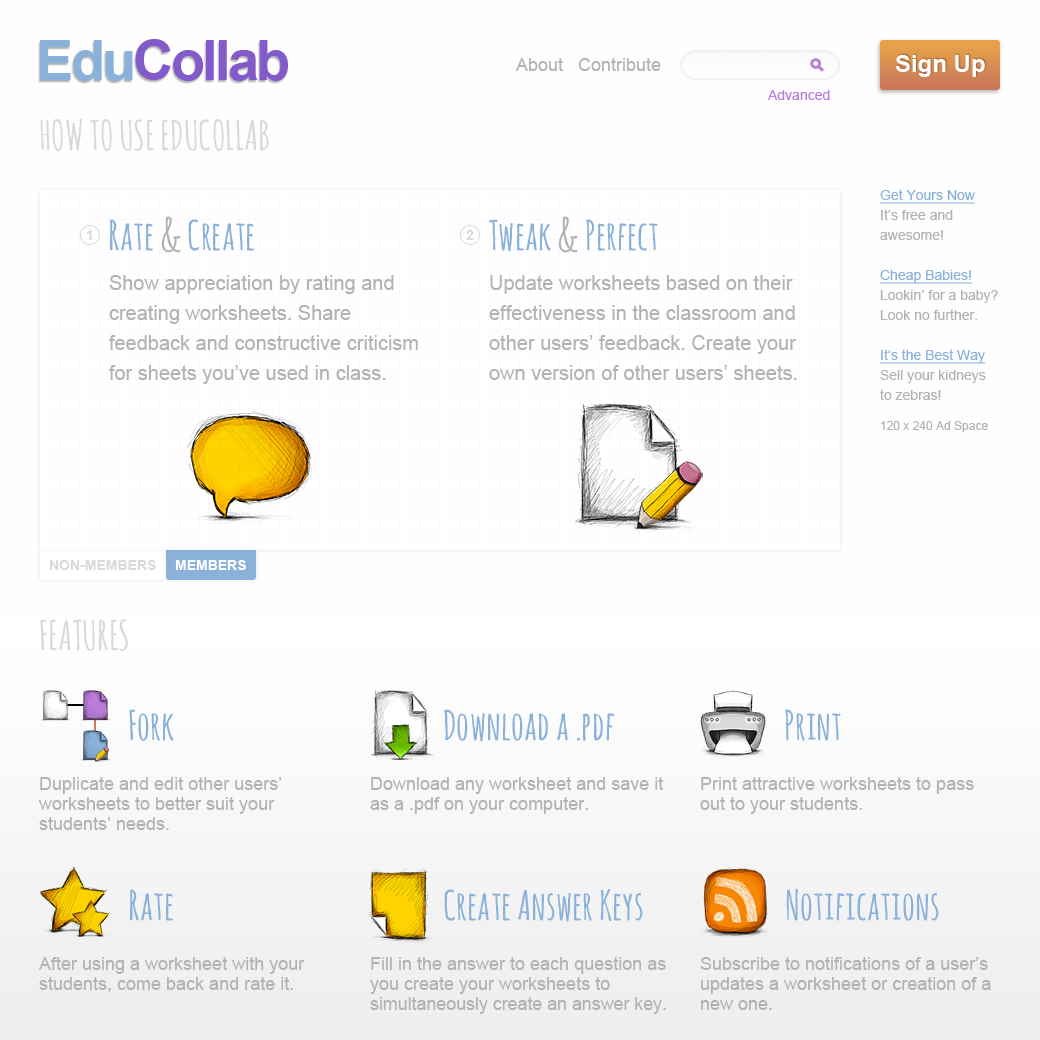
<style>
.page{position:relative;width:1040px;height:1040px;background:#fefefe}
.page>*{position:absolute;margin:0}
.t1{font:56px "Arial-BoldMT";letter-spacing:-0.05em;color:#835aca}
.t2{font:56px "Arial-BoldMT";letter-spacing:-0.05em;color:#8ab1da}
.t3{font:18px "ArialMT";color:#b2b2b2}
.t4{font:24px "Arial-BoldMT";color:#ffffff}
.t5{font:14px "ArialMT";color:#bb7dda}
.t6{font:40px "AmaticSC-Bold";color:#d9d9d9;text-transform:uppercase}
.t7{font:14px/20px "ArialMT";color:#b2b2b2}
.t8{font:14px/20px "ArialMT";color:#8ab1da;text-decoration:underline}
.t9{font:12px/20px "ArialMT";color:#b2b2b2}
.t10{font:40px "AmaticSC-Bold";color:#8ab1da}
.t11{font:48px "AmaticSC-Bold";color:#b2b2b2}
.t12{font:14px "Arial-BoldMT";color:#d9d9d9}
.t13{font:20px/30px "ArialMT"}
.t14{font:20px/30px "ArialMT";color:#b2b2b2}
.t15{font:14px "Arial-BoldMT";color:#ffffff}
.t16{font:40px "AmaticSC-Bold";color:#d9d9d9}
.t17{font:18px/20px "ArialMT";color:#b2b2b2}
.t18{font:18px/20px "ArialMT";letter-spacing:-0.005em;color:#b2b2b2}
</style>
<div class="page">
<p class="t1" style="left:40px;top:39px;width:248px;height:42px"><span class="t2">Edu</span>Collab</p>
<p class="t3" style="left:515px;top:58px;width:146px;height:13px">About   Contribute</p>
<p class="t4" style="left:895px;top:55px;width:90px;height:22px">Sign Up</p>
<p class="t5" style="left:768px;top:90px;width:62px;height:10px">Advanced</p>
<p class="t6" style="left:40px;top:119px;width:229px;height:32px">How to Use EduCollab</p>
<p class="t7" style="left:880px;top:189px;width:118px;height:243px"><span class="t8">Get Yours Now<br></span>It’s free and awesome!<br><br><span class="t8">Cheap Babies!<br></span>Lookin’ for a baby?<br>Look no further.<br><br><span class="t8">It‘s the Best Way<br></span>Sell your kidneys to zebras!<br><span class="t9">120 x 240 Ad Space</span></p>
<p class="t10" style="left:110px;top:216px;width:144px;height:37px">Rate <span class="t11">&amp; </span>Create</p>
<p class="t10" style="left:489px;top:216px;width:169px;height:37px">Tweak <span class="t11">&amp;</span> Perfect</p>
<p class="t12" style="left:87px;top:230px;width:5px;height:10px">1</p>
<p class="t12" style="left:87px;top:230px;width:5px;height:10px">1</p>
<p class="t12" style="left:466px;top:230px;width:8px;height:10px">2</p>
<p class="t12" style="left:466px;top:230px;width:8px;height:10px">2</p>
<p class="t13" style="left:109px;top:275px;width:310px;height:109px">As a non-member, you can browse and print worksheets. Simply search for worksheets using the form below, and click print.</p>
<p class="t14" style="left:109px;top:275px;width:309px;height:109px">Show appreciation by rating and creating worksheets. Share feedback and constructive criticism for sheets you’ve used in class.</p>
<p class="t14" style="left:489px;top:275px;width:308px;height:105px">Update worksheets based on their effectiveness in the classroom and other users’ feedback. Create your own version of other users’ sheets.</p>
<p class="t12" style="left:49px;top:560px;width:107px;height:10px">NON-MEMBERS</p>
<p class="t15" style="left:175px;top:560px;width:71px;height:10px">MEMBERS</p>
<p class="t16" style="left:40px;top:619px;width:88px;height:32px">FEATURES</p>
<p class="t10" style="left:129px;top:709px;width:45px;height:32px">Fork</p>
<p class="t10" style="left:444px;top:709px;width:171px;height:33px">Download a .pdf</p>
<p class="t10" style="left:785px;top:709px;width:56px;height:32px">Print</p>
<p class="t17" style="left:38px;top:777px;width:244px;height:53px">Duplicate and edit other users’ worksheets to better suit your students’ needs.</p>
<p class="t17" style="left:370px;top:777px;width:294px;height:37px">Download any worksheet and save it as a .pdf on your computer.</p>
<p class="t17" style="left:700px;top:777px;width:274px;height:37px">Print attractive worksheets to pass out to your students.</p>
<p class="t10" style="left:130px;top:889px;width:43px;height:32px">Rate</p>
<p class="t10" style="left:444px;top:888px;width:199px;height:34px">Create Answer Keys</p>
<p class="t10" style="left:786px;top:888px;width:153px;height:33px">Notifications</p>
<p class="t17" style="left:38px;top:957px;width:267px;height:35px">After using a worksheet with your students, come back and rate it.</p>
<p class="t17" style="left:370px;top:957px;width:296px;height:57px">Fill in the answer to each question as you create your worksheets to <span class="t18">simultaneously create an answer key.</span></p>
<p class="t17" style="left:700px;top:957px;width:291px;height:53px">Subscribe to notifications of a user’s updates a worksheet or creation of a new one.</p>
</div>
